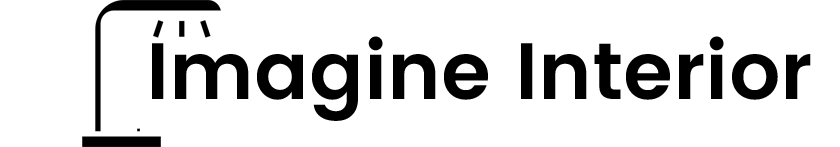
<style>
.page{position:relative;width:840px;height:147px;background:#ffffff}
.page>*{position:absolute;margin:0}
.t1{font:80px "Poppins-SemiBold";color:#000000}
</style>
<div class="page">
<p class="t1" style="left:152px;top:36px;width:659px;height:85px">Imagine Interior</p>
</div>
